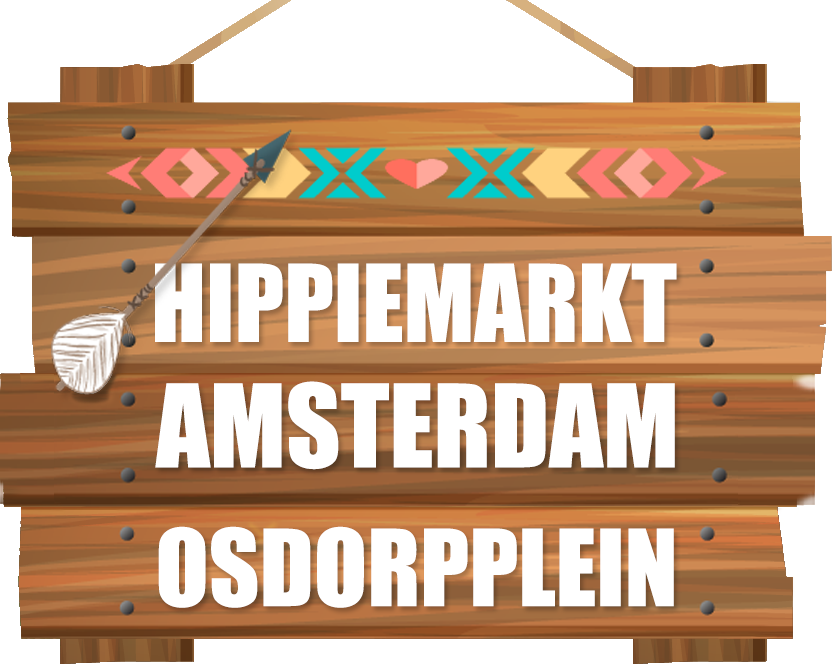
<style>
.page{position:relative;width:832px;height:664px;background:#ffffff}
.page>*{position:absolute;margin:0}
.t1{font:99px "Impact";color:#ffffff}
.t2{font:106px "Impact";color:#ffffff}
.t3{font:98px "Impact";color:#ffffff}
</style>
<div class="page">
<p class="t1" style="left:155px;top:263px;width:522px;height:79px">HIPPIEMARKT</p>
<p class="t2" style="left:155px;top:381px;width:520px;height:89px">AMSTERDAM</p>
<p class="t3" style="left:158px;top:526px;width:516px;height:82px">OSDORPPLEIN</p>
</div>
